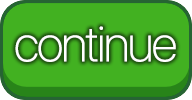
<style>
.page{position:relative;width:192px;height:100px;background:#42b121}
.page>*{position:absolute;margin:0}
.t1{font:50px "SFProDisplay-Thin";letter-spacing:-0.04em;color:#ffffff;font-weight:bold}
</style>
<div class="page">
<p class="t1" style="left:15px;top:26px;width:161px;height:36px">continue</p>
</div>
